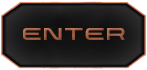
<style>
.page{position:relative;width:147px;height:70px}
.page>*{position:absolute;margin:0}
.t1{font:23.9px "Nebula";color:#a55e40;scale:1.04 1}
</style>
<div class="page">
<p class="t1" style="left:23px;top:28px;width:102px;height:12px">ENTER</p>
</div>
